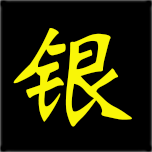
<style>
.page{position:relative;width:152px;height:152px;background:#000000}
.page>*{position:absolute;margin:0}
.t1{font:125.3px "Weibei-SC-Bold";color:#f9f607}
</style>
<div class="page">
<p class="t1" style="left:13px;top:28px;width:119px;height:99px">银</p>
</div>
